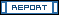
<style>
.page{position:relative;width:59px;height:15px;background:#ffffff}
.page>*{position:absolute;margin:0}
.t1{font:8px "BitDustTwo";color:#144c7d;text-transform:uppercase}
</style>
<div class="page">
<p class="t1" style="left:12px;top:5px;width:35px;height:5px">report</p>
</div>
